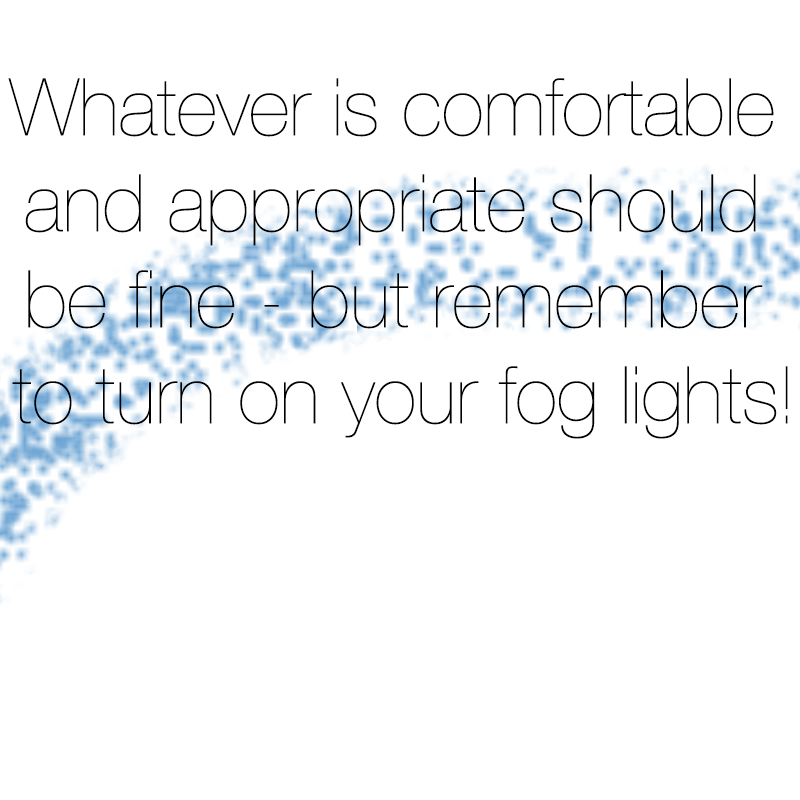
<style>
.page{position:relative;width:800px;height:800px;background:#ffffff}
.page>*{position:absolute;margin:0}
.t1{font:80px "HelveticaNeue-UltraLight";color:#000000}
</style>
<div class="page">
<p class="t1" style="left:8px;top:78px;width:780px;height:361px;text-align:center">Whatever is comfortable <br>and appropriate should <br>be fine - but remember <br>to turn on your fog lights!</p>
</div>
